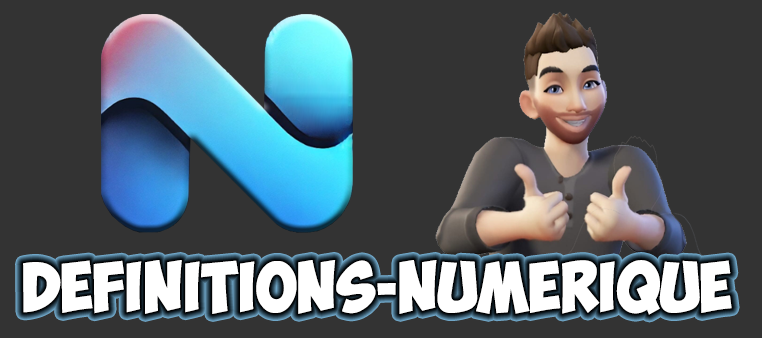
<style>
.page{position:relative;width:762px;height:338px;background:#333333}
.page>*{position:absolute;margin:0}
.t1{font:50px "ObelixPro";color:#ffffff}
</style>
<div class="page">
<p class="t1" style="left:23px;top:260px;width:709px;height:55px">DEFINITIONS-NUMERIQUE</p>
</div>
